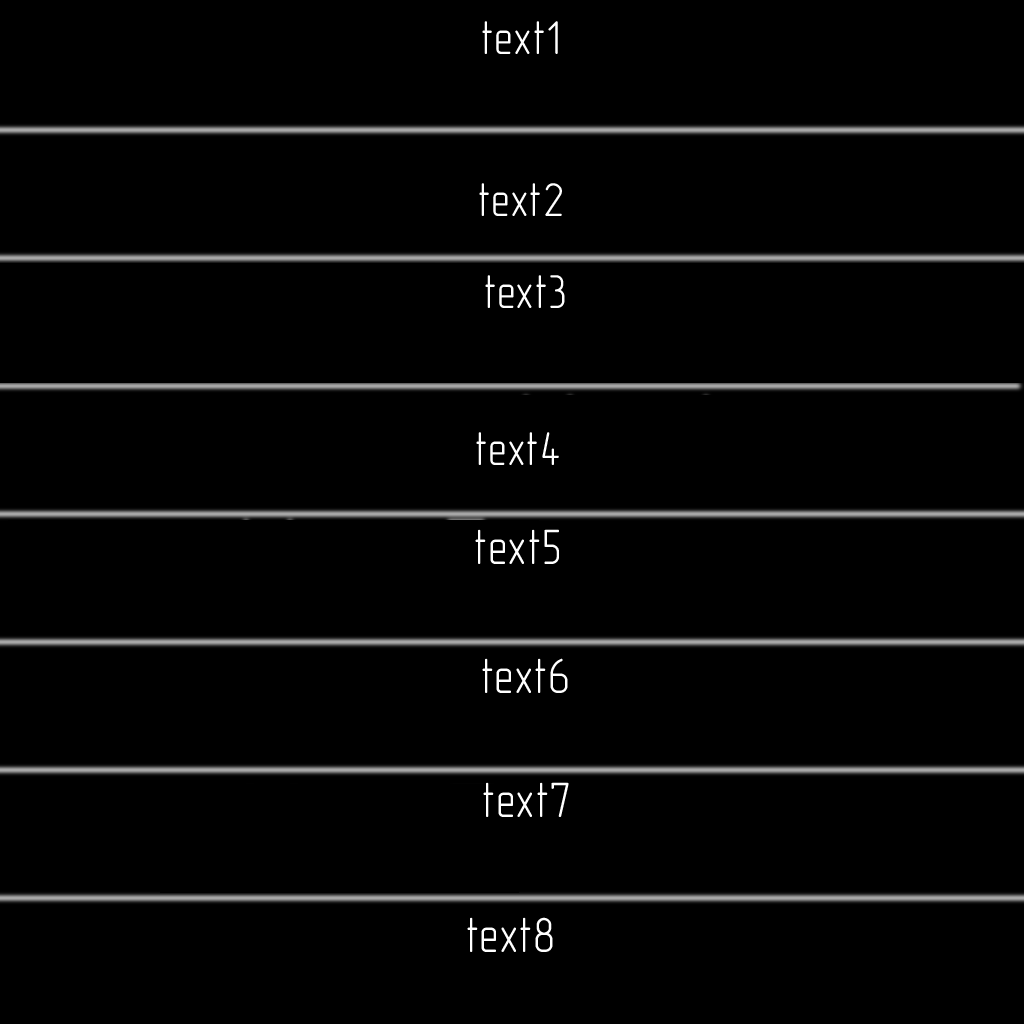
<style>
.page{position:relative;width:1024px;height:1024px;background:#000000}
.page>*{position:absolute;margin:0}
.t1{font:48px "GOST-2.304-81typeA";color:#ffffff}
.t2{font:50px "GOST-2.304-81typeA";color:#ffffff}
</style>
<div class="page">
<p class="t1" style="left:482px;top:21px;width:76px;height:33px">text1</p>
<p class="t1" style="left:479px;top:183px;width:83px;height:33px">text2</p>
<p class="t1" style="left:485px;top:275px;width:80px;height:33px">text3</p>
<p class="t1" style="left:476px;top:432px;width:83px;height:33px">text4</p>
<p class="t2" style="left:475px;top:529px;width:84px;height:35px">text5</p>
<p class="t2" style="left:482px;top:658px;width:86px;height:35px">text6</p>
<p class="t2" style="left:483px;top:782px;width:86px;height:35px">text7</p>
<p class="t2" style="left:467px;top:917px;width:86px;height:35px">text8</p>
</div>
